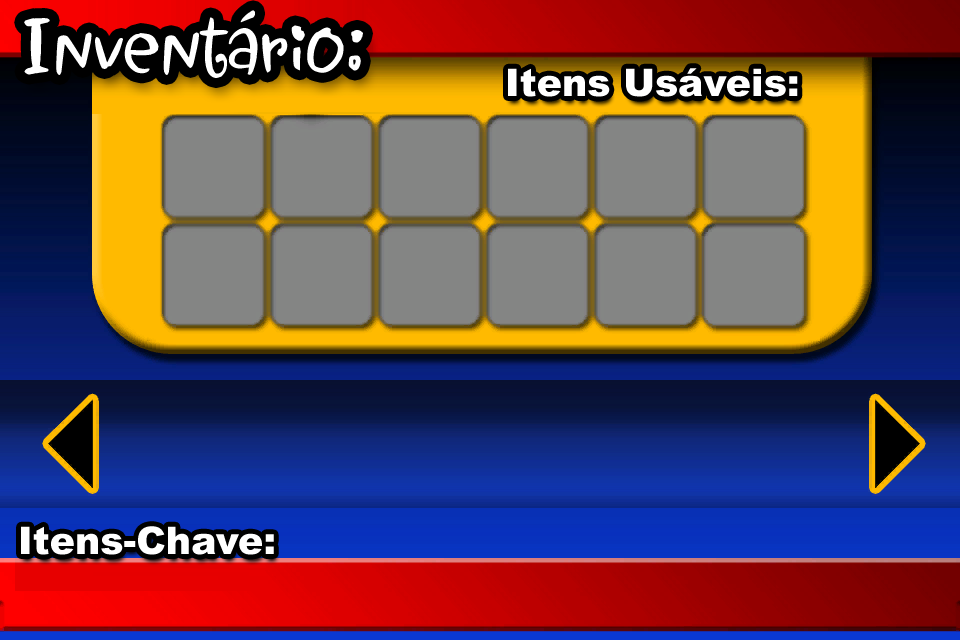
<style>
.page{position:relative;width:960px;height:640px}
.page>*{position:absolute;margin:0}
.t1{font:99px "Jewels";color:#ffffff;scale:0.9 1}
.t2{font:38px "Arial-Black";color:#ffffff}
</style>
<div class="page">
<p class="t1" style="left:24px;top:10px;width:339px;height:68px">Inventário:</p>
<p class="t2" style="left:508px;top:68px;width:290px;height:29px">Itens Usáveis:</p>
<p class="t2" style="left:21px;top:526px;width:253px;height:29px">Itens-Chave:</p>
</div>
